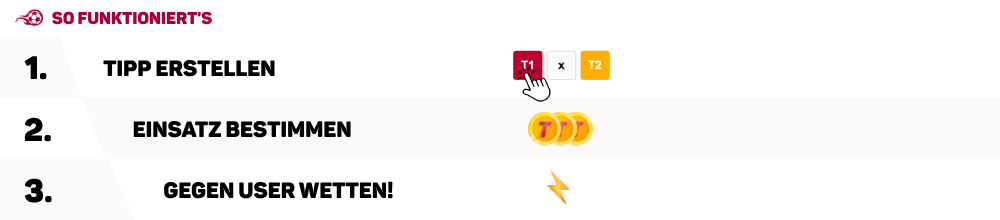
<style>
.page{position:relative;width:1000px;height:220px;background:#ffffff}
.page>*{position:absolute;margin:0}
.t1{font:17px "Panton-BlackCaps";color:#a80038}
.t2{font:32px "Panton-BlackCaps";color:#000000}
.t3{font:22px "Panton-BlackCaps";color:#000000}
</style>
<div class="page">
<p class="t1" style="left:52px;top:11px;width:160px;height:14px">So Funktioniert's</p>
<p class="t2" style="left:24px;top:56px;width:23px;height:24px">1.</p>
<p class="t3" style="left:103px;top:60px;width:172px;height:17px">Tipp erstellen</p>
<p class="t2" style="left:24px;top:117px;width:27px;height:25px">2.</p>
<p class="t3" style="left:133px;top:121px;width:218px;height:17px">Einsatz Bestimmen</p>
<p class="t2" style="left:24px;top:178px;width:28px;height:25px">3.</p>
<p class="t3" style="left:164px;top:181px;width:229px;height:18px">gegen User wetten!</p>
</div>
